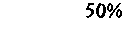
<style>
.page{position:relative;width:128px;height:32px;background:#ffffff}
.page>*{position:absolute;margin:0}
.t1{font:24px "DomCasualBT-Regular";color:#000000}
</style>
<div class="page">
<p class="t1" style="left:86px;top:3px;width:36px;height:15px">50%</p>
</div>
